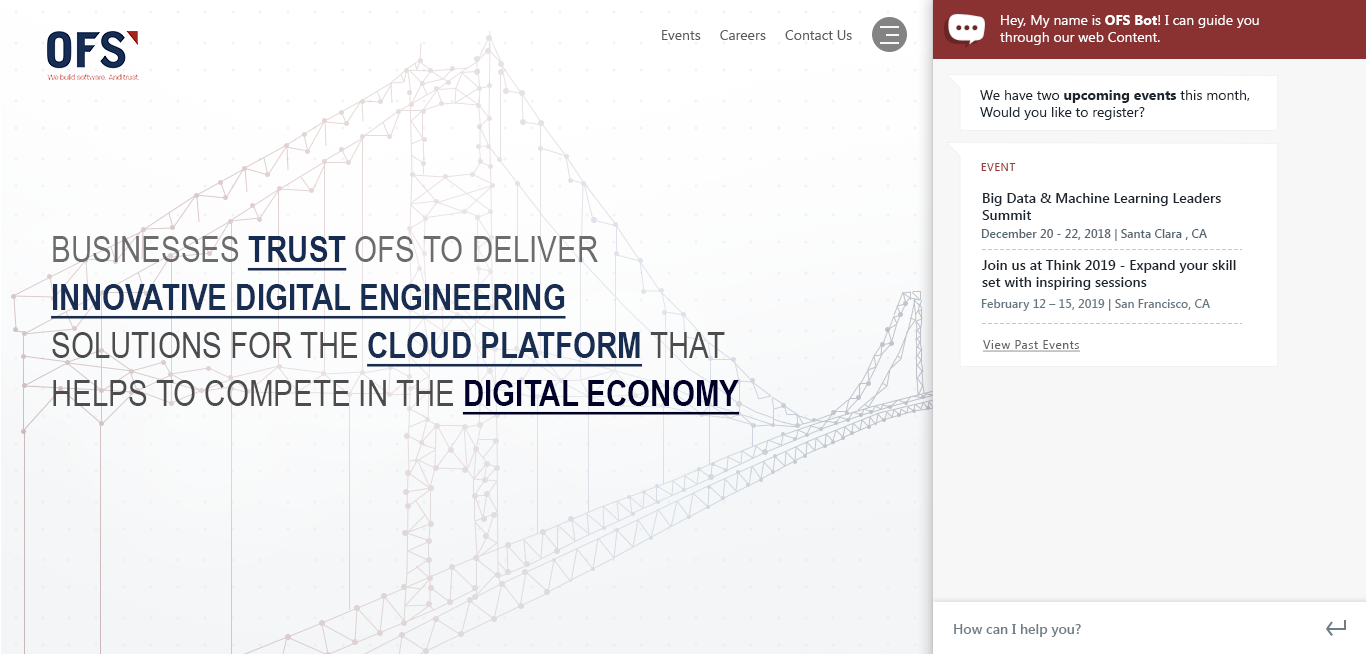
<style>
.page{position:relative;width:1366px;height:654px;background:#ffffff}
.page>*{position:absolute;margin:0}
.t1{font:14px "SegoeUI";color:#ffffff}
.t2{font:14px "SegoeUI-Bold";color:#ffffff}
.t3{font:14px "SegoeUI";color:#5b5b5b}
.t4{font:14px "SegoeUI";color:#1d262f}
.t5{font:14px "SegoeUI-Bold";color:#1d262f}
.t6{font:11px "SegoeUI";letter-spacing:0.05em;color:#993f3f;text-transform:uppercase}
.t7{font:14px "SegoeUI-SemiBold";color:#1d262f}
.t8{font:12px "SegoeUI-SemiBold";color:#566671}
.t9{font:36px/48px "ArialNarrow-Bold";color:#182d52;text-transform:uppercase;text-decoration:underline}
.t10{font:36px/48px "ArialNarrow";color:#6c6c6c;text-transform:uppercase}
.t11{font:36px/48px "ArialNarrow-Bold";color:#162b51;text-transform:uppercase;text-decoration:underline}
.t12{font:36px/48px "ArialNarrow";color:#4c4c4c;text-transform:uppercase}
.t13{font:36px/48px "ArialNarrow-Bold";color:#00002b;text-transform:uppercase;text-decoration:underline}
.t14{font:12px "SegoeUI-SemiBold";color:#657781}
.t15{font:12px "SegoeUI";letter-spacing:0.05em;color:#636363;text-decoration:underline}
.t16{font:14px "SegoeUI-SemiBold";color:#6f7d87}
</style>
<div class="page">
<p class="t1" style="left:1000px;top:15px;width:259px;height:30px">Hey, My name is <span class="t2">OFS Bot</span>! I can guide you through our web Content.</p>
<p class="t3" style="left:662px;top:30px;width:190px;height:10px">Events     Careers     Contact Us</p>
<p class="t4" style="left:980px;top:90px;width:270px;height:30px">We have two <span class="t5">upcoming events</span> this month,<br>Would you like to register?</p>
<p class="t6" style="left:981px;top:163px;width:35px;height:8px">Event</p>
<p class="t7" style="left:982px;top:193px;width:239px;height:27px">Big Data &amp; Machine Learning Leaders Summit</p>
<p class="t8" style="left:981px;top:229px;width:226px;height:12px">December 20 - 22, 2018 | Santa Clara , CA</p>
<p class="t9" style="left:51px;top:236px;width:689px;height:179px"><span class="t10">Businesses </span><span class="t11">Trust </span><span class="t10">OFS to deliver </span>Innovative Digital Engineering    <span class="t12">Solutions for the </span>Cloud Platform <span class="t12">that helps to compete in the </span><span class="t13">Digital Economy</span></p>
<p class="t7" style="left:982px;top:260px;width:254px;height:30px">Join us at Think 2019 - Expand your skill set with inspiring sessions</p>
<p class="t14" style="left:981px;top:299px;width:229px;height:12px">February 12 – 15, 2019 | San Francisco, CA</p>
<p class="t15" style="left:983px;top:340px;width:98px;height:12px">View Past Events</p>
<p class="t16" style="left:954px;top:624px;width:127px;height:13px">How can I help you?</p>
</div>
